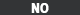
<style>
.page{position:relative;width:80px;height:15px;background:#333436}
.page>*{position:absolute;margin:0}
.t1{font:11px "HeadlineR-HM";letter-spacing:-0.02em;color:#ffffff}
</style>
<div class="page">
<p class="t1" style="left:31px;top:3px;width:18px;height:10px">NO</p>
</div>
